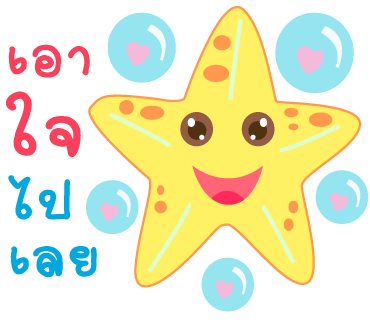
<style>
.page{position:relative;width:370px;height:320px;background:#ffffff}
.page>*{position:absolute;margin:0}
.t1{font:85px "2005_iannnnnMTV";letter-spacing:0.025em;color:#fa405a;scale:1.06 1}
.t2{font:116px "2005_iannnnnMTV";letter-spacing:0.025em;color:#fa405a;scale:1.06 1}
.t3{font:85px "2005_iannnnnMTV";letter-spacing:0.025em;color:#00a8e1;scale:1.06 1}
</style>
<div class="page">
<p class="t1" style="left:8px;top:44px;width:82px;height:34px">เอา</p>
<p class="t2" style="left:6px;top:91px;width:75px;height:67px">ใจ</p>
<p class="t3" style="left:8px;top:175px;width:62px;height:45px">ไป</p>
<p class="t3" style="left:10px;top:246px;width:87px;height:32px">เลย</p>
</div>
